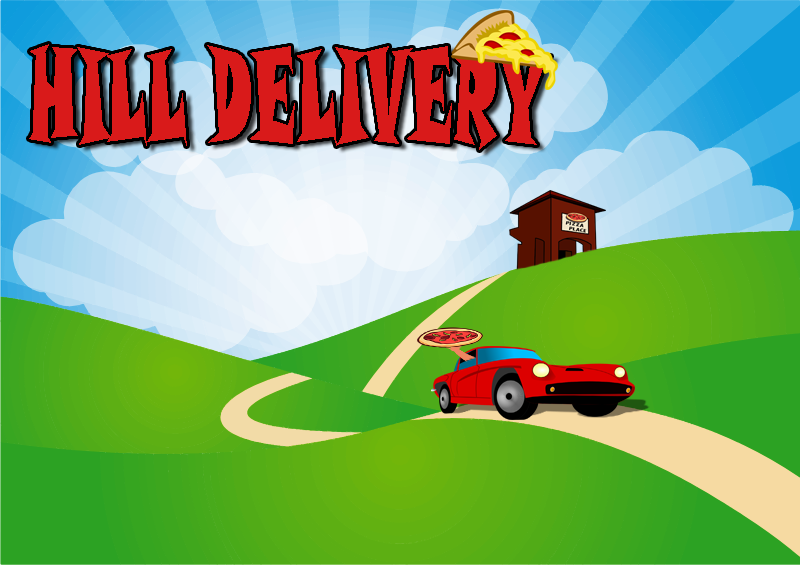
<style>
.page{position:relative;width:800px;height:565px}
.page>*{position:absolute;margin:0}
.t1{font:130.4px "SnapITC-Regular";color:#d91a1a;scale:0.42 1}
</style>
<div class="page">
<p class="t1" style="left:29px;top:44px;width:522px;height:106px">HILL DELIVERY</p>
</div>
